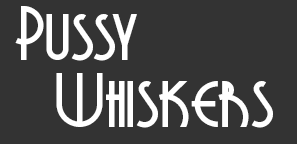
<style>
.page{position:relative;width:297px;height:144px;background:#333333}
.page>*{position:absolute;margin:0}
.t1{font:72px "GrenadierNF";color:#ffffff}
</style>
<div class="page">
<p class="t1" style="left:15px;top:6px;width:122px;height:55px">Pussy</p>
<p class="t1" style="left:56px;top:73px;width:217px;height:55px">Whiskers</p>
</div>
